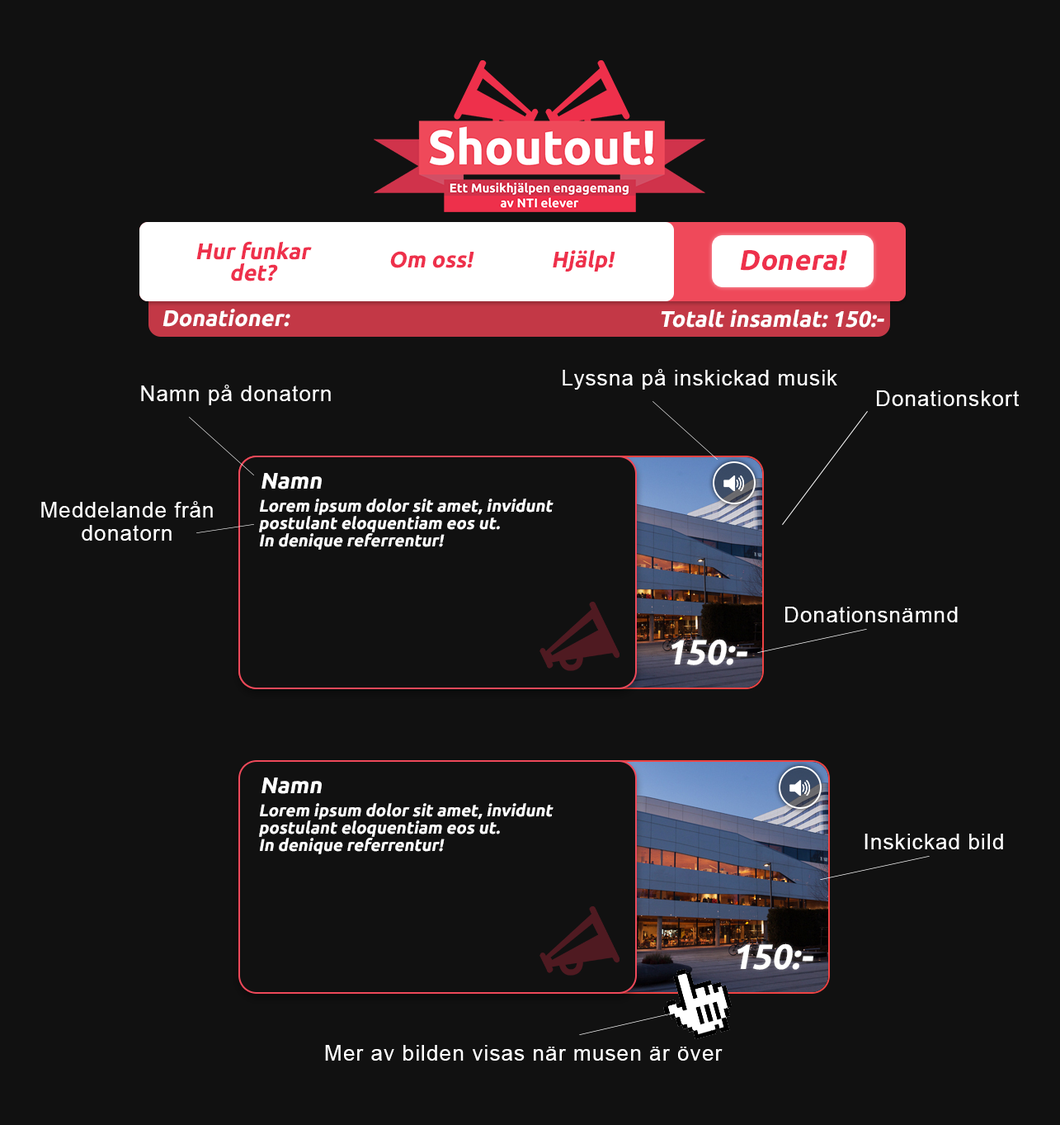
<style>
.page{position:relative;width:1060px;height:1125px;background:#111111}
.page>*{position:absolute;margin:0}
.t1{font:22.4px/22px "Ubuntu-Bold";color:#ee304b;font-style:italic}
.t2{font:22.4px "Ubuntu-Bold";color:#ee304b;font-style:italic}
.t3{font:28.3px "Ubuntu-Bold";color:#ee304b;font-style:italic}
.t4{font:22.4px "Ubuntu-Bold";color:#ffffff;font-style:italic}
.t5{font:21.6px "ArialMT";letter-spacing:0.04em;color:#ffffff}
.t6{font:21.6px/23.2px "ArialMT";letter-spacing:0.04em;color:#ffffff}
.t7{font:16.8px/17.1px "Ubuntu-Bold";color:#ffffff;font-style:italic}
.t8{font:35.1px "Ubuntu-Bold";color:#ffffff;font-style:italic}
</style>
<div class="page">
<p class="t1" style="left:196px;top:241px;width:116px;height:40px;text-align:center">Hur funkar<br>det?</p>
<p class="t2" style="left:390px;top:251px;width:84px;height:17px">Om oss!</p>
<p class="t2" style="left:553px;top:249px;width:63px;height:22px">Hjälp!</p>
<p class="t3" style="left:740px;top:250px;width:107px;height:21px">Donera!</p>
<p class="t4" style="left:163px;top:309px;width:127px;height:18px">Donationer:</p>
<p class="t4" style="left:661px;top:309px;width:224px;height:19px">Totalt insamlat: 150:-</p>
<p class="t5" style="left:563px;top:369px;width:274px;height:20px">Lyssna på inskickad musik</p>
<p class="t5" style="left:141px;top:385px;width:190px;height:20px">Namn på donatorn</p>
<p class="t5" style="left:877px;top:390px;width:142px;height:16px">Donationskort</p>
<p class="t4" style="left:262px;top:473px;width:60px;height:16px">Namn</p>
<p class="t6" style="left:41px;top:501px;width:172px;height:39px;text-align:center">Meddelande från<br>donatorn</p>
<p class="t7" style="left:259px;top:498px;width:295px;height:52px">Lorem ipsum dolor sit amet, invidunt <br>postulant eloquentiam eos ut. <br>In denique referrentur!</p>
<p class="t5" style="left:786px;top:606px;width:172px;height:16px">Donationsnämnd</p>
<p class="t8" style="left:672px;top:639px;width:76px;height:26px">150:-</p>
<p class="t4" style="left:262px;top:777px;width:60px;height:17px">Namn</p>
<p class="t7" style="left:259px;top:803px;width:295px;height:51px">Lorem ipsum dolor sit amet, invidunt <br>postulant eloquentiam eos ut. <br>In denique referrentur!</p>
<p class="t5" style="left:865px;top:833px;width:138px;height:16px">Inskickad bild</p>
<p class="t8" style="left:738px;top:943px;width:76px;height:27px">150:-</p>
<p class="t5" style="left:325px;top:1045px;width:398px;height:15px">Mer av bilden visas när musen är över</p>
</div>
